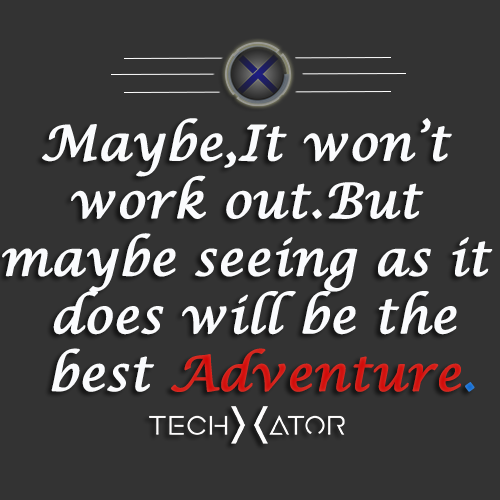
<style>
.page{position:relative;width:500px;height:500px;background:#333333}
.page>*{position:absolute;margin:0}
.t1{font:48px "LucidaCalligraphy-Italic";color:#fafbfd;font-weight:bold}
.t2{font:48px "LucidaCalligraphy-Italic";color:#d00707;font-weight:bold}
.t3{font:48px "LucidaCalligraphy-Italic";color:#0765d0;font-weight:bold}
</style>
<div class="page">
<p class="t1" style="left:2px;top:118px;width:491px;height:274px;text-align:center">Maybe,It won’t <br>work out.But <br>maybe seeing as it <br>does will be the<br> best <span class="t2">Adventure</span><span class="t3">.</span></p>
</div>
